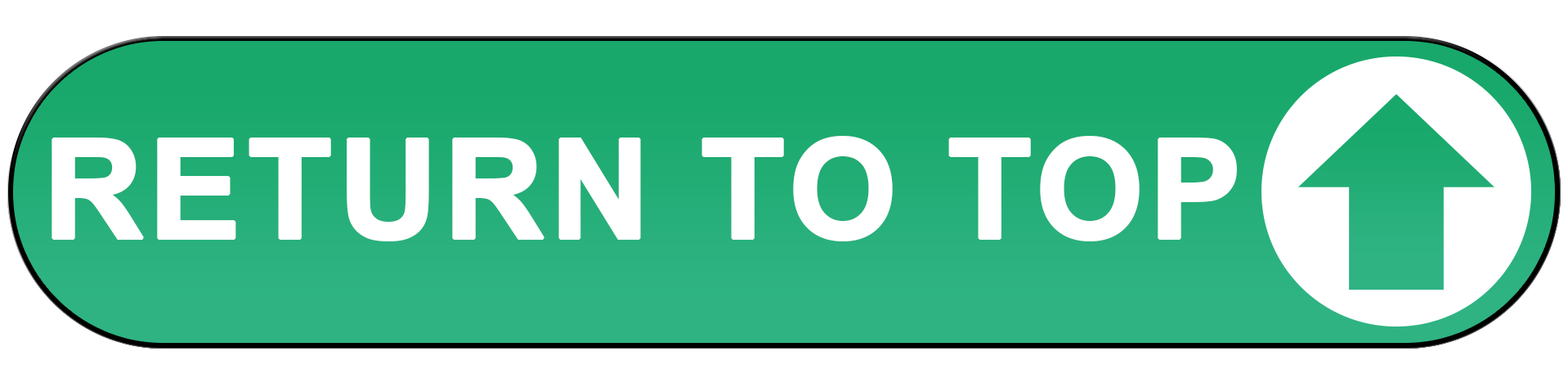
<style>
.page{position:relative;width:1568px;height:383px;background:#ffffff}
.page>*{position:absolute;margin:0}
.t1{font:137.8px "Arial-BoldMT";letter-spacing:0.02em;color:#ffffff;font-weight:bold}
</style>
<div class="page">
<p class="t1" style="left:52px;top:136px;width:1185px;height:105px">RETURN TO TOP</p>
</div>
